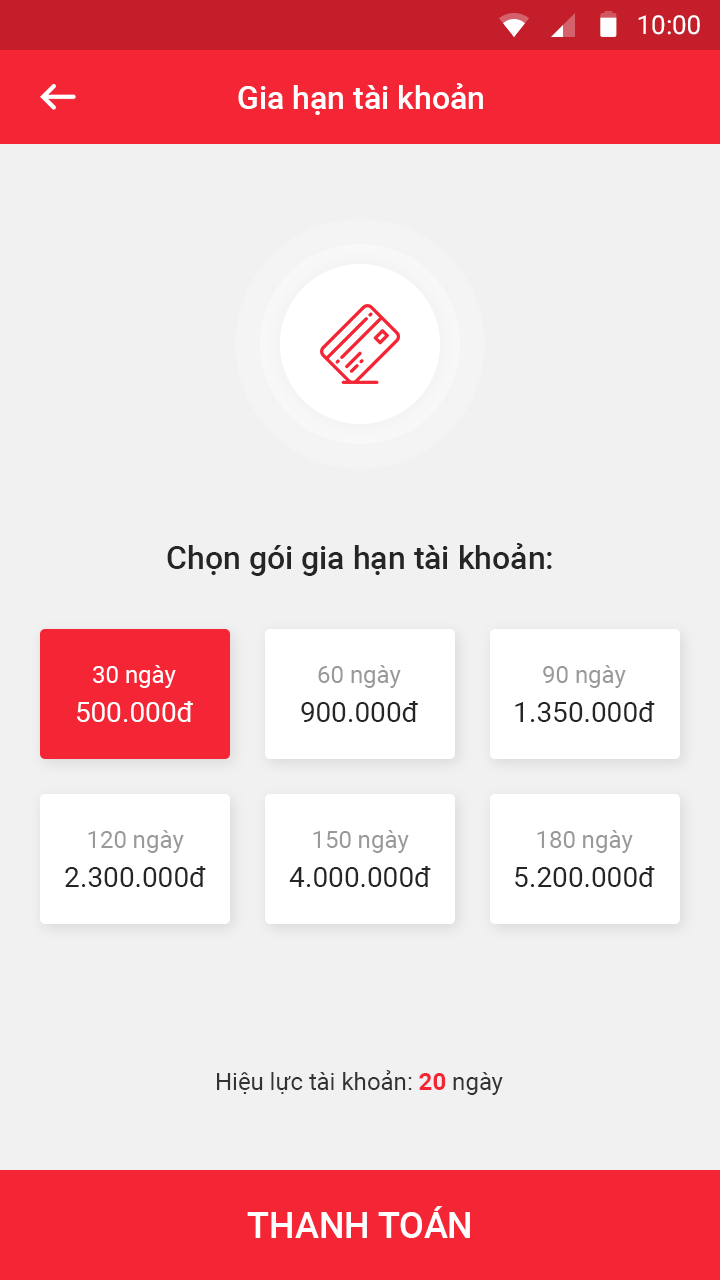
<style>
.page{position:relative;width:720px;height:1280px;background:#f1f1f1}
.page>*{position:absolute;margin:0}
.t1{font:26px "Roboto-Regular";color:#ffffff}
.t2{font:32px "Roboto-Medium";color:#ffffff}
.t3{font:32px "Roboto-Medium";color:#252525}
.t4{font:28px/39px "Roboto-Regular";color:#ffffff}
.t5{font:24px/39px "Roboto-Regular";color:#ffffff}
.t6{font:28px/39px "Roboto-Regular";color:#252525}
.t7{font:24px/39px "Roboto-Regular";color:#999999}
.t8{font:24px "Roboto-Regular";color:#333333}
.t9{font:24px "Roboto-Bold";color:#f42535}
.t10{font:36px "Roboto-Medium";color:#ffffff;text-transform:uppercase}
</style>
<div class="page">
<p class="t1" style="left:638px;top:15px;width:62px;height:20px">10:00</p>
<p class="t2" style="left:238px;top:83px;width:245px;height:32px">Gia hạn tài khoản</p>
<p class="t3" style="left:167px;top:543px;width:385px;height:33px">Chọn gói gia hạn tài khoản:</p>
<p class="t4" style="left:77px;top:665px;width:116px;height:57px;text-align:center"><span class="t5">30 ngày<br></span>500.000đ</p>
<p class="t6" style="left:301px;top:665px;width:117px;height:57px;text-align:center"><span class="t7">60 ngày<br></span>900.000đ</p>
<p class="t6" style="left:515px;top:665px;width:140px;height:57px;text-align:center"><span class="t7">90 ngày<br></span>1.350.000đ</p>
<p class="t6" style="left:65px;top:830px;width:141px;height:57px;text-align:center"><span class="t7">120 ngày<br></span>2.300.000đ</p>
<p class="t6" style="left:289px;top:830px;width:142px;height:57px;text-align:center"><span class="t7">150 ngày<br></span>4.000.000đ</p>
<p class="t6" style="left:515px;top:830px;width:140px;height:57px;text-align:center"><span class="t7">180 ngày<br></span>5.200.000đ</p>
<p class="t8" style="left:217px;top:1070px;width:286px;height:25px">Hiệu lực tài khoản: <span class="t9">20 </span>ngày</p>
<p class="t10" style="left:247px;top:1206px;width:223px;height:32px">Thanh toán</p>
</div>
